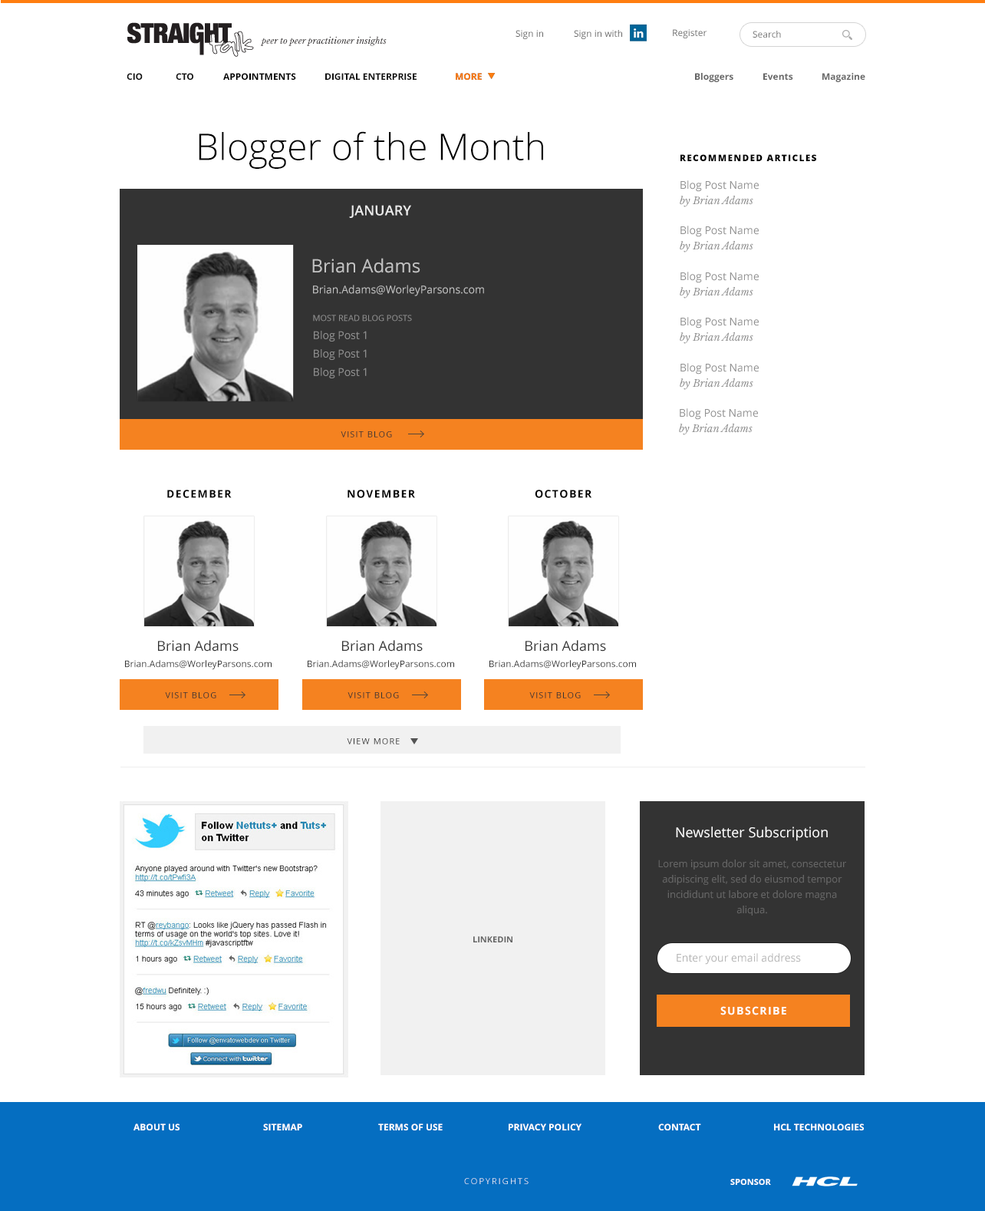
<style>
.page{position:relative;width:985px;height:1211px;background:#ffffff}
.page>*{position:absolute;margin:0}
.t1{font:9.2px "OpenSans";color:#666666}
.t2{font:8.4px "LibreBaskerville-Italic";color:#231f20}
.t3{font:9.2px "OpenSans";color:#727272}
.t4{font:9.2px "OpenSans-Bold";color:#111111;text-transform:uppercase}
.t5{font:9.2px "OpenSans-Bold";color:#000000;text-transform:uppercase}
.t6{font:9.2px "OpenSans-Bold";color:#ff7e10;text-transform:uppercase}
.t7{font:9.2px "OpenSans-Bold";color:#666666}
.t8{font:36.8px "OpenSans-Light";color:#000000}
.t9{font:9.2px "OpenSans-Extrabold";letter-spacing:0.1em;color:#000000;text-transform:uppercase}
.t10{font:10.7px/15.3px "OpenSans";color:#8f8f8f}
.t11{font:10px/15.3px "LibreBaskerville-Italic";color:#8f8f8f}
.t12{font:13.8px "OpenSans-Semibold";color:#eaeaea;text-transform:uppercase}
.t13{font:18.4px "OpenSans";color:#c2c2c2}
.t14{font:10.7px "OpenSans";color:#c0c0c0}
.t15{font:8.4px "OpenSans";color:#8f8f8f;text-transform:uppercase}
.t16{font:10.7px "OpenSans";color:#8f8f8f}
.t17{font:8.4px "OpenSans";letter-spacing:0.1em;color:#323232;text-transform:uppercase}
.t18{font:10.7px "OpenSans-Bold";letter-spacing:0.1em;color:#000000;text-transform:uppercase}
.t19{font:13.8px "OpenSans";color:#323232}
.t20{font:9.2px "OpenSans";color:#323232}
.t21{font:13.8px "OpenSans";color:#ffffff}
.t22{font:10px/15.3px "OpenSans";color:#666666}
.t23{font:8.4px "OpenSans-Bold";color:#666666;text-transform:uppercase}
.t24{font:10.7px "OpenSans";color:#b5b5b5}
.t25{font:10.7px "OpenSans-Bold";letter-spacing:0.1em;color:#fefefe;text-transform:uppercase}
.t26{font:9.2px "OpenSans-Bold";color:#ffffff;text-transform:uppercase}
.t27{font:8.4px "OpenSans-Light";letter-spacing:0.2em;text-transform:uppercase}
.t28{font:8.4px "OpenSans-Bold";color:#ffffff;text-transform:uppercase}
</style>
<div class="page">
<p class="t1" style="left:516px;top:30px;width:27px;height:9px">Sign in</p>
<p class="t1" style="left:574px;top:30px;width:48px;height:9px">Sign in with</p>
<p class="t1" style="left:673px;top:29px;width:34px;height:9px">Register</p>
<p class="t2" style="left:260px;top:36px;width:127px;height:10px">peer to peer practitioner insights</p>
<p class="t3" style="left:753px;top:31px;width:28px;height:7px">Search</p>
<p class="t4" style="left:127px;top:73px;width:16px;height:7px">CIO</p>
<p class="t4" style="left:176px;top:73px;width:17px;height:7px">CTO</p>
<p class="t5" style="left:223px;top:73px;width:73px;height:7px">Appointments</p>
<p class="t4" style="left:325px;top:73px;width:92px;height:7px">Digital enterprise</p>
<p class="t6" style="left:456px;top:73px;width:26px;height:7px">More</p>
<p class="t6" style="left:456px;top:73px;width:26px;height:7px">More</p>
<p class="t7" style="left:695px;top:73px;width:38px;height:9px">Bloggers</p>
<p class="t7" style="left:763px;top:73px;width:30px;height:7px">Events</p>
<p class="t7" style="left:822px;top:73px;width:43px;height:9px">Magazine</p>
<p class="t8" style="left:199px;top:131px;width:344px;height:38px">Blogger of the Month</p>
<p class="t9" style="left:680px;top:154px;width:136px;height:7px">Recommended Articles</p>
<p class="t10" style="left:680px;top:180px;width:79px;height:27px">Blog Post Name<br><span class="t11">by Brian Adams</span></p>
<p class="t12" style="left:349px;top:205px;width:62px;height:13px">January</p>
<p class="t10" style="left:680px;top:226px;width:79px;height:26px">Blog Post Name<br><span class="t11">by Brian Adams</span></p>
<p class="t13" style="left:312px;top:258px;width:108px;height:15px">Brian Adams</p>
<p class="t10" style="left:680px;top:272px;width:79px;height:26px">Blog Post Name<br><span class="t11">by Brian Adams</span></p>
<p class="t14" style="left:313px;top:285px;width:171px;height:11px">Brian.Adams@WorleyParsons.com</p>
<p class="t15" style="left:313px;top:315px;width:99px;height:6px">Most Read Blog Posts</p>
<p class="t10" style="left:680px;top:317px;width:79px;height:27px">Blog Post Name<br><span class="t11">by Brian Adams</span></p>
<p class="t16" style="left:314px;top:331px;width:53px;height:10px">Blog Post 1</p>
<p class="t16" style="left:314px;top:349px;width:53px;height:11px">Blog Post 1</p>
<p class="t10" style="left:680px;top:363px;width:79px;height:27px">Blog Post Name<br><span class="t11">by Brian Adams</span></p>
<p class="t16" style="left:314px;top:367px;width:53px;height:11px">Blog Post 1</p>
<p class="t10" style="left:679px;top:408px;width:79px;height:27px">Blog Post Name<br><span class="t11">by Brian Adams</span></p>
<p class="t17" style="left:341px;top:431px;width:51px;height:6px">Visit Blog</p>
<p class="t18" style="left:167px;top:489px;width:65px;height:9px">December</p>
<p class="t18" style="left:348px;top:489px;width:67px;height:9px">November</p>
<p class="t18" style="left:535px;top:489px;width:57px;height:9px">October</p>
<p class="t19" style="left:158px;top:640px;width:81px;height:11px">Brian Adams</p>
<p class="t19" style="left:342px;top:640px;width:81px;height:11px">Brian Adams</p>
<p class="t19" style="left:525px;top:640px;width:81px;height:11px">Brian Adams</p>
<p class="t20" style="left:125px;top:660px;width:147px;height:10px">Brian.Adams@WorleyParsons.com</p>
<p class="t20" style="left:308px;top:660px;width:146px;height:10px">Brian.Adams@WorleyParsons.com</p>
<p class="t20" style="left:489px;top:660px;width:147px;height:10px">Brian.Adams@WorleyParsons.com</p>
<p class="t17" style="left:165px;top:692px;width:51px;height:6px">Visit Blog</p>
<p class="t17" style="left:348px;top:692px;width:51px;height:6px">Visit Blog</p>
<p class="t17" style="left:529px;top:692px;width:52px;height:6px">Visit Blog</p>
<p class="t17" style="left:347px;top:738px;width:53px;height:6px">View More</p>
<p class="t21" style="left:676px;top:826px;width:152px;height:15px">Newsletter Subscription</p>
<p class="t22" style="left:658px;top:859px;width:188px;height:56px;text-align:center">Lorem ipsum dolor sit amet, consectetur adipiscing elit, sed do eiusmod tempor incididunt ut labore et dolore magna aliqua.</p>
<p class="t23" style="left:473px;top:936px;width:39px;height:6px">LINKEDIN</p>
<p class="t24" style="left:677px;top:953px;width:124px;height:11px">Enter your email address</p>
<p class="t25" style="left:720px;top:1006px;width:66px;height:9px">Subscribe</p>
<p class="t26" style="left:133px;top:1123px;width:47px;height:7px">About us</p>
<p class="t26" style="left:263px;top:1123px;width:39px;height:7px">SiteMAP</p>
<p class="t26" style="left:378px;top:1123px;width:65px;height:7px">Terms of use</p>
<p class="t26" style="left:509px;top:1123px;width:73px;height:7px">privacy policy</p>
<p class="t26" style="left:658px;top:1123px;width:43px;height:7px">contact</p>
<p class="t26" style="left:774px;top:1123px;width:90px;height:7px">HCL technologies</p>
<p class="t27" style="left:464px;top:1178px;width:65px;height:6px">Copyrights</p>
<p class="t28" style="left:730px;top:1178px;width:41px;height:6px">Sponsor</p>
</div>
